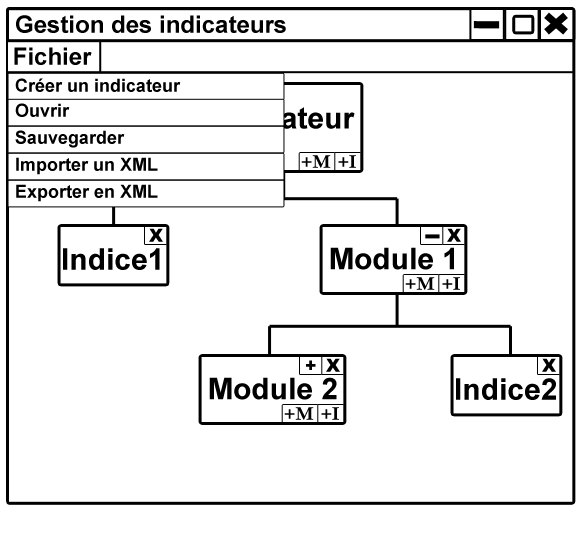
<style>
.page{position:relative;width:582px;height:554px;background:#ffffff}
.page>*{position:absolute;margin:0}
.t1{font:24px "Arial-BoldMT";color:#000000}
.t2{font:18px "Arial-BoldMT";color:#000000}
.t3{font:30px "Arial-BoldMT"}
.t4{font:18px "CalisMTBol";color:#000000}
.t5{font:18px "Arial-Black";color:#000000}
.t6{font:30px "Arial-BoldMT";color:#000000}
</style>
<div class="page">
<p class="t1" style="left:16px;top:15px;width:270px;height:18px">Gestion des indicateurs</p>
<p class="t1" style="left:14px;top:47px;width:78px;height:18px">Fichier</p>
<p class="t2" style="left:15px;top:78px;width:166px;height:14px">Créer un indicateur</p>
<p class="t2" style="left:15px;top:103px;width:55px;height:14px">Ouvrir</p>
<p class="t3" style="left:212px;top:107px;width:143px;height:22px">Indicateur</p>
<p class="t2" style="left:15px;top:130px;width:110px;height:18px">Sauvegarder</p>
<p class="t2" style="left:16px;top:157px;width:142px;height:18px">Importer un XML</p>
<p class="t4" style="left:301px;top:155px;width:30px;height:13px">+M</p>
<p class="t4" style="left:338px;top:155px;width:18px;height:13px">+I</p>
<p class="t2" style="left:16px;top:184px;width:142px;height:18px">Exporter en XML</p>
<p class="t5" style="left:149px;top:228px;width:14px;height:14px">X</p>
<p class="t5" style="left:447px;top:228px;width:14px;height:14px">X</p>
<p class="t6" style="left:63px;top:248px;width:97px;height:22px">Indice1</p>
<p class="t6" style="left:330px;top:247px;width:124px;height:23px">Module 1</p>
<p class="t4" style="left:405px;top:277px;width:30px;height:13px">+M</p>
<p class="t4" style="left:442px;top:277px;width:18px;height:13px">+I</p>
<p class="t5" style="left:306px;top:360px;width:10px;height:10px">+</p>
<p class="t5" style="left:326px;top:358px;width:14px;height:14px">X</p>
<p class="t5" style="left:542px;top:358px;width:14px;height:14px">X</p>
<p class="t6" style="left:209px;top:377px;width:128px;height:23px">Module 2</p>
<p class="t6" style="left:456px;top:378px;width:100px;height:22px">Indice2</p>
<p class="t4" style="left:284px;top:407px;width:30px;height:13px">+M</p>
<p class="t4" style="left:321px;top:407px;width:18px;height:13px">+I</p>
</div>
